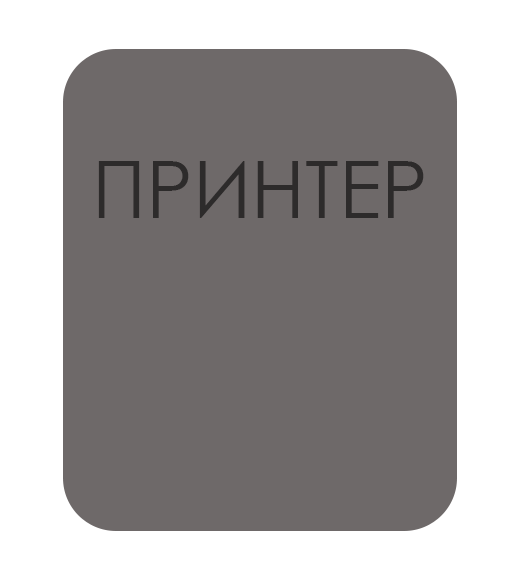
<style>
.page{position:relative;width:520px;height:580px;background:#6e6969}
.page>*{position:absolute;margin:0}
.t1{font:79px "CenturyGothic";color:#2d2b2b}
</style>
<div class="page">
<p class="t1" style="left:98px;top:161px;width:326px;height:57px">ПРИНТЕР</p>
</div>
